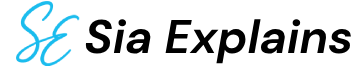
<style>
.page{position:relative;width:362px;height:67px;background:#ffffff}
.page>*{position:absolute;margin:0}
.t1{font:47px "DMSans-BoldItalic";color:#000000}
</style>
<div class="page">
<p class="t1" style="left:85px;top:19px;width:267px;height:45px">Sia Explains</p>
</div>
